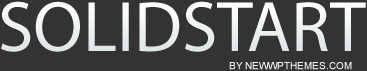
<style>
.page{position:relative;width:367px;height:71px;background:#333333}
.page>*{position:absolute;margin:0}
.t1{font:72px "MyriadPro-Regular";color:#ffffff;text-transform:uppercase}
.t2{font:10px "ArialMT";color:#f8f8f9;text-transform:uppercase}
</style>
<div class="page">
<p class="t1" style="left:1px;top:1px;width:365px;height:51px">SolidStart</p>
<p class="t2" style="left:229px;top:62px;width:123px;height:8px">by NewWpThemes.com</p>
</div>
